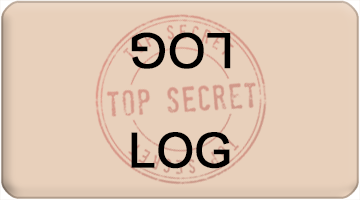
<style>
.page{position:relative;width:360px;height:200px;background:#e8d0bb}
.page>*{position:absolute;margin:0}
.t1{font:48px "ArialMT";color:#000000;font-weight:bold}
</style>
<div class="page">
<p class="t1" style="left:131px;top:32px;width:100px;height:37px;rotate:180deg">LOG</p>
<p class="t1" style="left:131px;top:132px;width:99px;height:37px">LOG</p>
</div>
